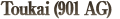
<style>
.page{position:relative;width:120px;height:19px;background:#ffffff}
.page>*{position:absolute;margin:0}
.t1{font:18px "RyuminPro-ExBold";letter-spacing:-0.08em;color:#4a3f32;font-weight:bold;scale:0.9 1}
</style>
<div class="page">
<p class="t1" style="left:0px;top:0px;width:112px;height:19px">Toukai (901 AG)</p>
</div>
